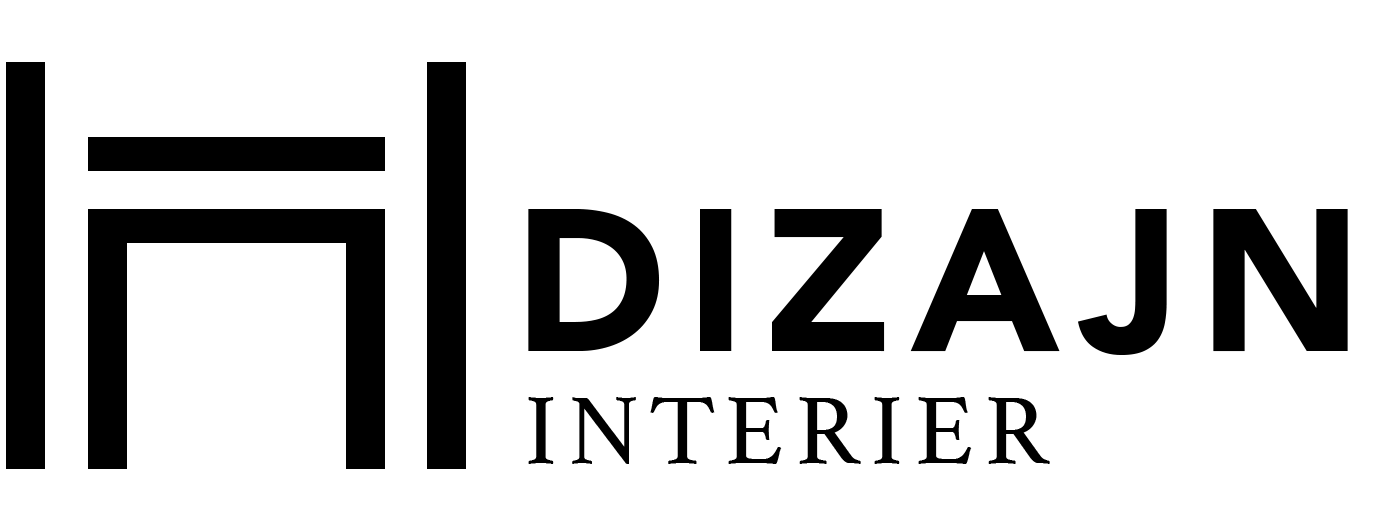
<style>
.page{position:relative;width:1376px;height:521px;background:#ffffff}
.page>*{position:absolute;margin:0}
.t1{font:200px "Avenir-Black";letter-spacing:0.1em;color:#000000}
.t2{font:100px "Athelas-Regular";letter-spacing:0.1em;color:#000000}
</style>
<div class="page">
<p class="t1" style="left:528px;top:209px;width:820px;height:146px">DIZAJN</p>
<p class="t2" style="left:528px;top:397px;width:522px;height:67px">INTERIER</p>
</div>
